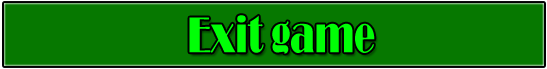
<style>
.page{position:relative;width:547px;height:69px;background:#067800}
.page>*{position:absolute;margin:0}
.t1{font:52.1px "Broadway";color:#00ff06;scale:0.66 1}
</style>
<div class="page">
<p class="t1" style="left:189px;top:15px;width:186px;height:39px">Exit game</p>
</div>
